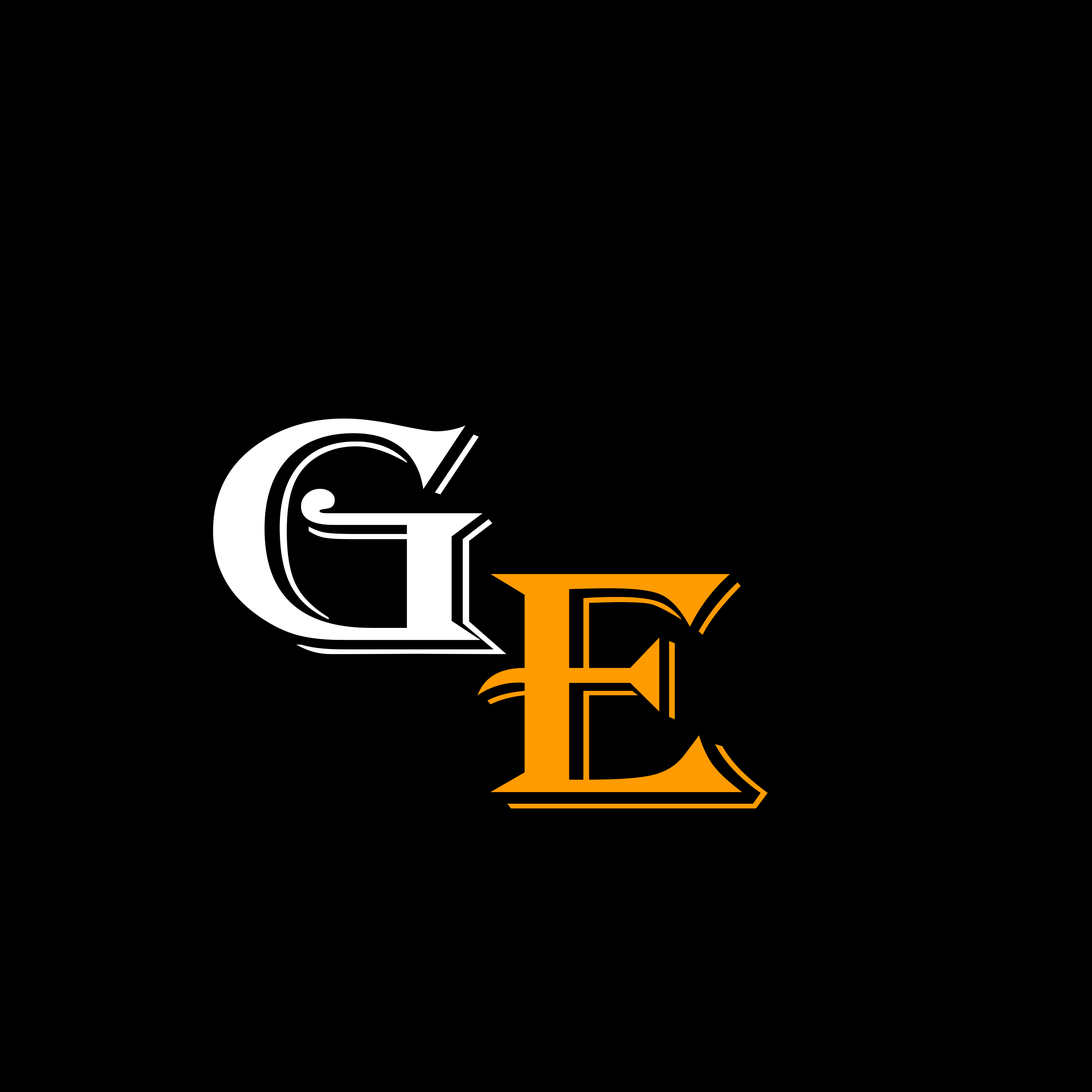
<style>
.page{position:relative;width:1092px;height:1092px;background:#000000}
.page>*{position:absolute;margin:0}
.t1{font:351.7px "Algerian";color:#ffffff;scale:1.31 1}
.t2{font:351.7px "Algerian";color:#fe9b00;scale:1.31 1}
</style>
<div class="page">
<p class="t1" style="left:213px;top:419px;width:293px;height:235px">G</p>
<p class="t2" style="left:478px;top:574px;width:290px;height:234px">E</p>
</div>
